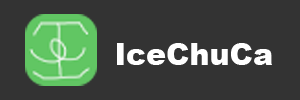
<style>
.page{position:relative;width:300px;height:100px;background:#333333}
.page>*{position:absolute;margin:0}
.t1{font:30px "Arial-Black";color:#ffffff}
</style>
<div class="page">
<p class="t1" style="left:117px;top:43px;width:155px;height:22px">IceChuCa</p>
</div>
